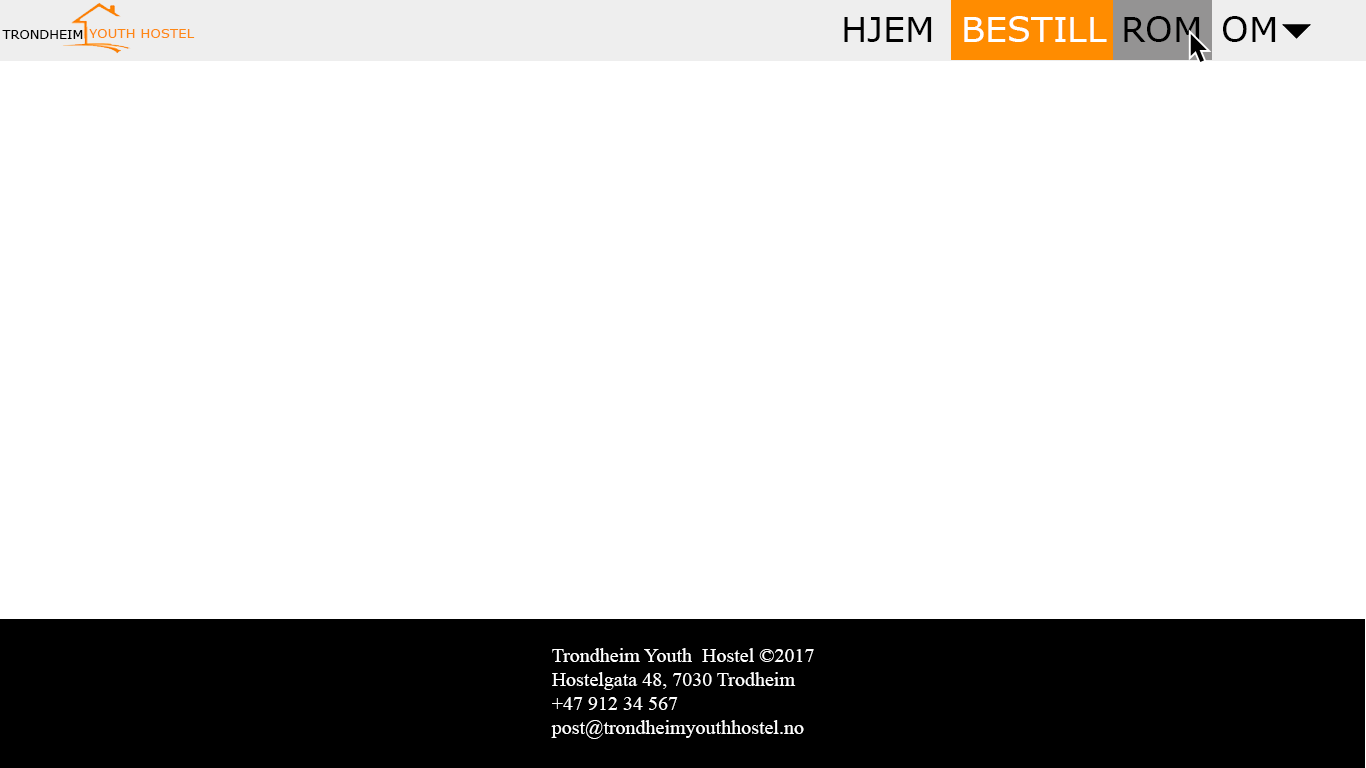
<style>
.page{position:relative;width:1366px;height:768px;background:#ffffff}
.page>*{position:absolute;margin:0}
.t1{font:35px "Verdana";color:#000000}
.t2{font:35px "Verdana";color:#ffffff}
.t3{font:12.9px "Verdana";color:#000000}
.t4{font:13.3px "Verdana";color:#fe8714}
.t5{font:20px "TimesNewRomanPSMT";color:#ffffff}
</style>
<div class="page">
<p class="t1" style="left:844px;top:17px;width:88px;height:25px">HJEM</p>
<p class="t2" style="left:964px;top:16px;width:143px;height:26px">BESTILL</p>
<p class="t1" style="left:1124px;top:16px;width:76px;height:26px">ROM</p>
<p class="t1" style="left:1223px;top:16px;width:53px;height:26px">OM</p>
<p class="t3" style="left:2px;top:30px;width:81px;height:9px">TRONDHEIM</p>
<p class="t4" style="left:89px;top:29px;width:106px;height:9px">YOUTH HOSTEL</p>
<p class="t5" style="left:551px;top:648px;width:263px;height:91px">Trondheim Youth  Hostel ©2017<br>Hostelgata 48, 7030 Trodheim<br>+47 912 34 567<br>post@trondheimyouthhostel.no</p>
</div>
